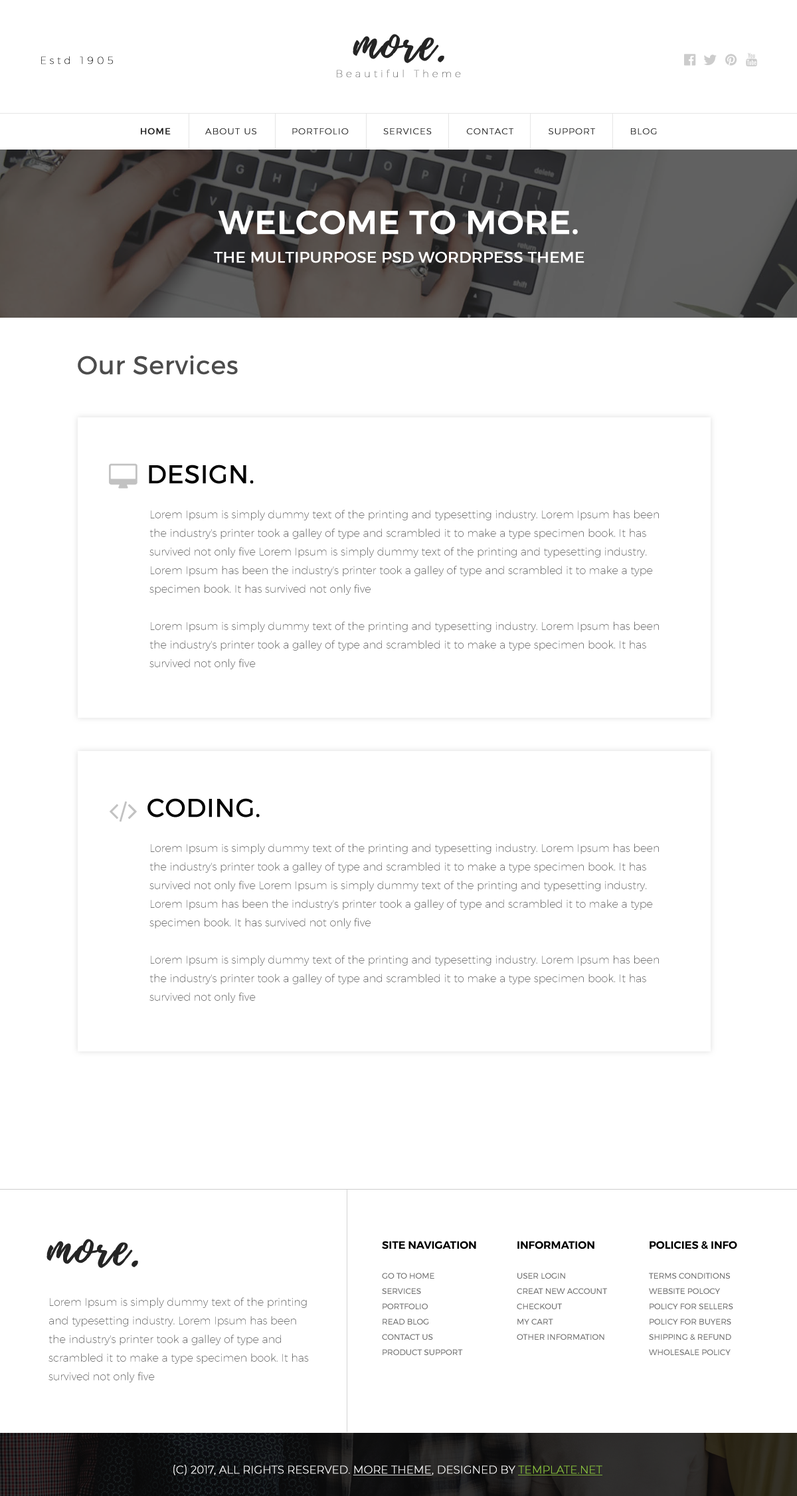
<style>
.page{position:relative;width:797px;height:1496px;background:#ffffff}
.page>*{position:absolute;margin:0}
.t1{font:49.2px "Playlist-Script";color:#252525;font-weight:bold}
.t2{font:10px "Montserrat-Thin";letter-spacing:0.3em;color:#252525;font-weight:bold}
.t3{font:10px "Montserrat-Thin";letter-spacing:0.3em;color:#7c7c7c;font-weight:bold}
.t4{font:8.6px "Montserrat-ExtraLight";letter-spacing:0.08em;color:#252525;text-transform:uppercase;font-weight:bold}
.t5{font:8.6px "Montserrat-Regular";letter-spacing:0.08em;color:#252525;text-transform:uppercase;font-weight:bold}
.t6{font:15.2px/28.6px "Montserrat-Regular";color:#ffffff;text-transform:uppercase;font-weight:bold}
.t7{font:32.7px/28.6px "Montserrat-Medium";color:#ffffff;text-transform:uppercase;font-weight:bold}
.t8{font:25.2px "Montserrat-Regular";color:#4c4c4c;font-weight:bold}
.t9{font:25.2px "Montserrat-Regular";color:#000000;text-transform:uppercase;font-weight:bold}
.t10{font:10.6px/18.6px "Montserrat-ExtraLight";color:#4c4c4c}
.t11{font:8px/15.3px "Montserrat-Regular";color:#707070;text-transform:uppercase}
.t12{font:10.6px/15.3px "Montserrat-SemiBold";color:#000000;text-transform:uppercase}
.t13{font:8px/29.9px "Montserrat-Regular";color:#707070;text-transform:uppercase}
.t14{font:10.6px "Montserrat-ExtraLight";color:#ffffff;text-transform:uppercase;font-weight:bold}
.t15{font:10.6px "Montserrat-ExtraLight";color:#ffffff;text-transform:uppercase;font-weight:bold;text-decoration:underline}
.t16{font:10.6px "Montserrat-ExtraLight";color:#8dc63f;text-transform:uppercase;font-weight:bold;text-decoration:underline}
</style>
<div class="page">
<p class="t1" style="left:353px;top:34px;width:91px;height:29px">more.</p>
<p class="t2" style="left:41px;top:56px;width:72px;height:8px">Estd 1905</p>
<p class="t3" style="left:337px;top:69px;width:124px;height:9px">Beautiful Theme</p>
<p class="t4" style="left:141px;top:128px;width:516px;height:7px"><span class="t5">Home</span>          about us          portfolio          services          contact          support          blog</p>
<p class="t6" style="left:214px;top:211px;width:371px;height:52px;text-align:center"><span class="t7">Welcome to more.<br></span>the multipurpose psd wordrpess theme</p>
<p class="t8" style="left:78px;top:355px;width:160px;height:20px">Our Services</p>
<p class="t9" style="left:149px;top:464px;width:105px;height:20px">design.</p>
<p class="t10" style="left:149px;top:510px;width:510px;height:159px">Lorem Ipsum is simply dummy text of the printing and typesetting industry. Lorem Ipsum has been the industry's printer took a galley of type and scrambled it to make a type specimen book. It has survived not only five Lorem Ipsum is simply dummy text of the printing and typesetting industry. Lorem Ipsum has been the industry's printer took a galley of type and scrambled it to make a type specimen book. It has survived not only five<br><br>Lorem Ipsum is simply dummy text of the printing and typesetting industry. Lorem Ipsum has been the industry's printer took a galley of type and scrambled it to make a type specimen book. It has survived not only five</p>
<p class="t9" style="left:147px;top:798px;width:113px;height:19px">coding.</p>
<p class="t10" style="left:149px;top:843px;width:510px;height:160px">Lorem Ipsum is simply dummy text of the printing and typesetting industry. Lorem Ipsum has been the industry's printer took a galley of type and scrambled it to make a type specimen book. It has survived not only five Lorem Ipsum is simply dummy text of the printing and typesetting industry. Lorem Ipsum has been the industry's printer took a galley of type and scrambled it to make a type specimen book. It has survived not only five<br><br>Lorem Ipsum is simply dummy text of the printing and typesetting industry. Lorem Ipsum has been the industry's printer took a galley of type and scrambled it to make a type specimen book. It has survived not only five</p>
<p class="t1" style="left:47px;top:1238px;width:91px;height:30px">more.</p>
<p class="t11" style="left:382px;top:1240px;width:94px;height:115px"><span class="t12">Site Navigation<br></span><span class="t13">go to home<br></span>services<br>portfolio<br>read blog<br>contact us<br>product support</p>
<p class="t11" style="left:517px;top:1240px;width:90px;height:99px"><span class="t12">information<br></span><span class="t13">user login<br></span>creat new account<br>checkout<br>my cart<br>other information</p>
<p class="t11" style="left:649px;top:1240px;width:88px;height:115px"><span class="t12">policies &amp; Info<br></span><span class="t13">Terms Conditions <br></span>website polocy<br>Policy for Sellers <br>Policy for Buyers <br>Shipping &amp; Refund <br>Wholesale Policy</p>
<p class="t10" style="left:49px;top:1297px;width:260px;height:85px">Lorem Ipsum is simply dummy text of the printing and typesetting industry. Lorem Ipsum has been the industry's printer took a galley of type and scrambled it to make a type specimen book. It has survived not only five</p>
<p class="t14" style="left:173px;top:1464px;width:430px;height:11px">(C) 2017, All Rights reserved. <span class="t15">more theme</span>, designed by <span class="t16">tEMPLATE.net</span></p>
</div>
